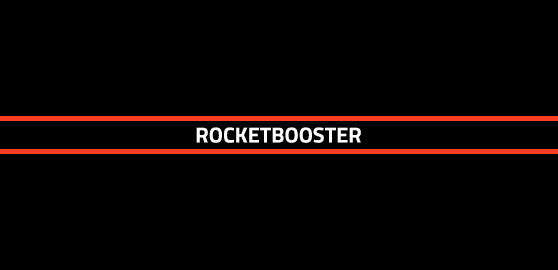
<style>
.page{position:relative;width:558px;height:270px;background:#000000}
.page>*{position:absolute;margin:0}
.t1{font:21.8px "TitilliumWeb-Bold";color:#ffffff}
</style>
<div class="page">
<p class="t1" style="left:196px;top:127px;width:165px;height:16px">ROCKETBOOSTER</p>
</div>
